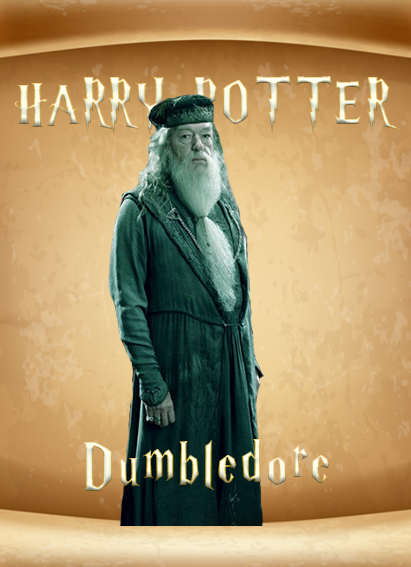
<style>
.page{position:relative;width:411px;height:567px}
.page>*{position:absolute;margin:0}
.t1{font:60px "HarryP";letter-spacing:0.06em}
.t2{font:69px "HarryP";letter-spacing:0.06em}
</style>
<div class="page">
<p class="t1" style="left:14px;top:76px;width:386px;height:62px">HARRY POTTER</p>
<p class="t2" style="left:82px;top:439px;width:248px;height:52px">Dumbledore</p>
</div>
